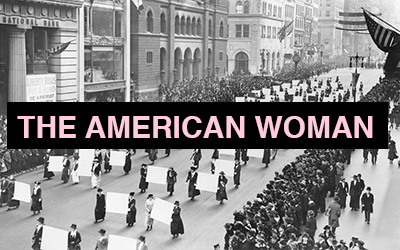
<style>
.page{position:relative;width:400px;height:250px}
.page>*{position:absolute;margin:0}
.t1{font:30px "Helvetica-Bold";color:#ffccdd}
</style>
<div class="page">
<p class="t1" style="left:17px;top:116px;width:356px;height:22px">THE AMERICAN WOMAN</p>
</div>
